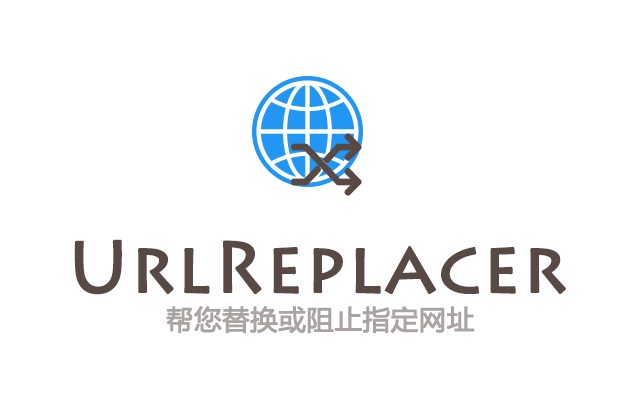
<style>
.page{position:relative;width:640px;height:400px;background:#ffffff}
.page>*{position:absolute;margin:0}
.t1{font:72px "LithosPro-Regular";color:#594945;font-weight:bold}
.t2{font:27px "MicrosoftYaHei";color:#a9a3a1;font-weight:bold}
</style>
<div class="page">
<p class="t1" style="left:74px;top:239px;width:492px;height:56px">UrlReplacer</p>
<p class="t2" style="left:166px;top:306px;width:309px;height:28px">帮您替换或阻止指定网址</p>
</div>
